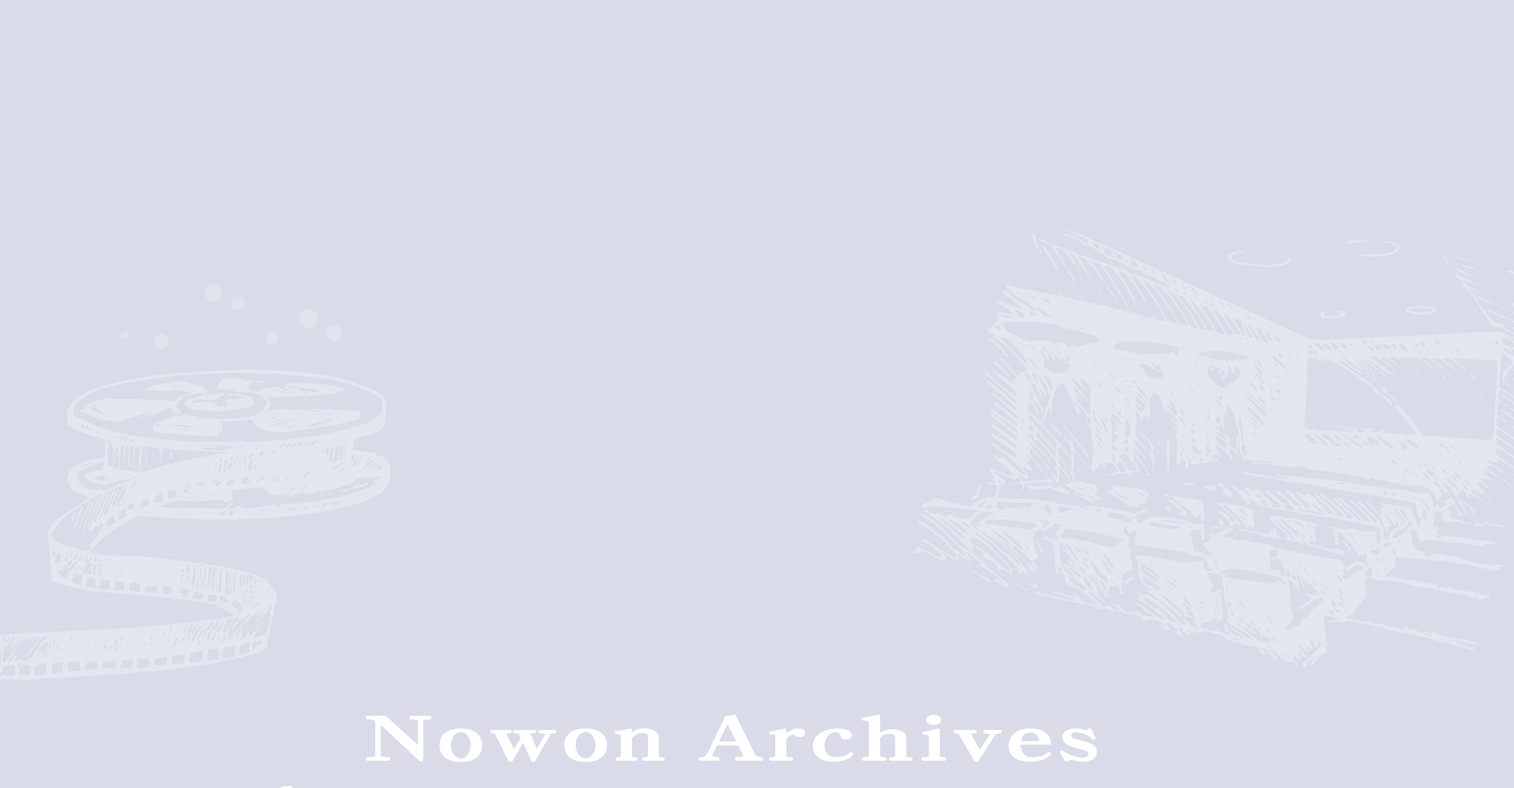
<style>
.page{position:relative;width:1514px;height:788px;background:#d9dbe8}
.page>*{position:absolute;margin:0}
.t1{font:59.2px "H2mjrE";color:#ffffff;font-weight:bold;scale:1.36 1}
</style>
<div class="page">
<p class="t1" style="left:366px;top:714px;width:731px;height:48px">Nowon Archives</p>
</div>
